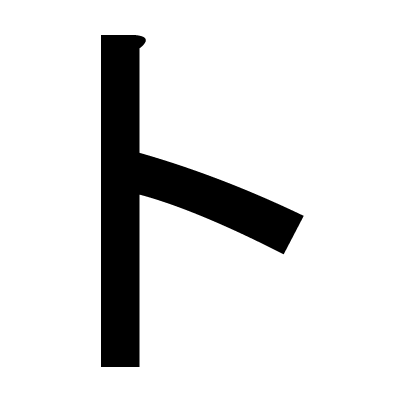
<style>
.page{position:relative;width:400px;height:400px;background:#ffffff}
.page>*{position:absolute;margin:0}
.t1{font:424.8px "MS-PGothic";color:#000000}
</style>
<div class="page">
<p class="t1" style="left:101px;top:35px;width:203px;height:332px">ト</p>
</div>
